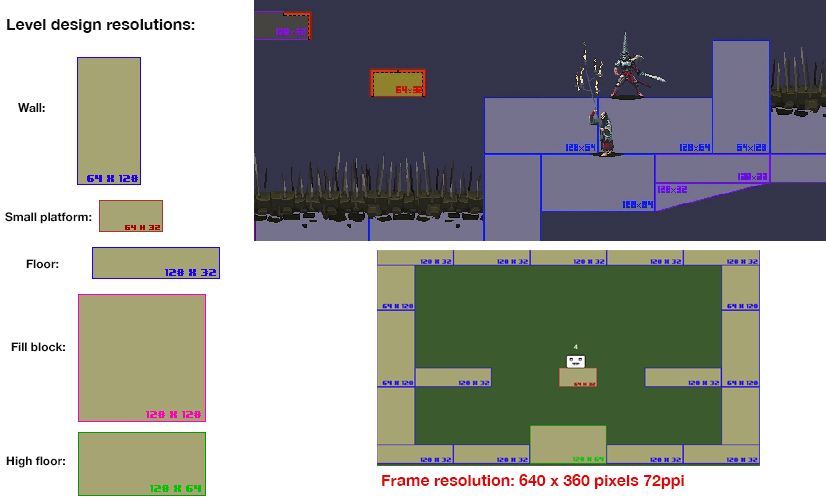
<style>
.page{position:relative;width:826px;height:499px;background:#ffffff}
.page>*{position:absolute;margin:0}
.t1{font:16px "HelveticaNeue-Bold";color:#0e0e0e}
.t2{font:12px "HelveticaNeue-Bold";color:#0e0e0e}
.t3{font:16px "HelveticaNeue-Bold";color:#df0707}
</style>
<div class="page">
<p class="t1" style="left:7px;top:19px;width:188px;height:14px">Level design resolutions:</p>
<p class="t2" style="left:18px;top:103px;width:27px;height:9px">Wall:</p>
<p class="t2" style="left:5px;top:212px;width:87px;height:12px">Small platform:</p>
<p class="t2" style="left:26px;top:259px;width:33px;height:10px">Floor:</p>
<p class="t2" style="left:11px;top:342px;width:54px;height:10px">Fill block:</p>
<p class="t2" style="left:6px;top:456px;width:59px;height:12px">High floor:</p>
<p class="t3" style="left:382px;top:474px;width:302px;height:15px">Frame resolution: 640 x 360 pixels 72ppi</p>
</div>
